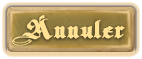
<style>
.page{position:relative;width:142px;height:59px}
.page>*{position:absolute;margin:0}
.t1{font:17px/33.1px "MagnificentPersonalUse";letter-spacing:0.05em;color:#ffe294;font-weight:bold;scale:1.35 1}
</style>
<div class="page">
<p class="t1" style="left:12px;top:15px;width:113px;height:31px;text-align:center">Annuler</p>
</div>
